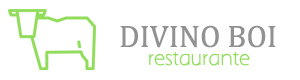
<style>
.page{position:relative;width:300px;height:80px;background:#ffffff}
.page>*{position:absolute;margin:0}
.t1{font:31.2px "Cambria";color:#919191}
.t2{font:18.7px "AaarghNormal";color:#91dc5a}
</style>
<div class="page">
<p class="t1" style="left:120px;top:25px;width:156px;height:23px">DIVINO BOI</p>
<p class="t2" style="left:149px;top:52px;width:101px;height:14px">restaurante</p>
</div>
